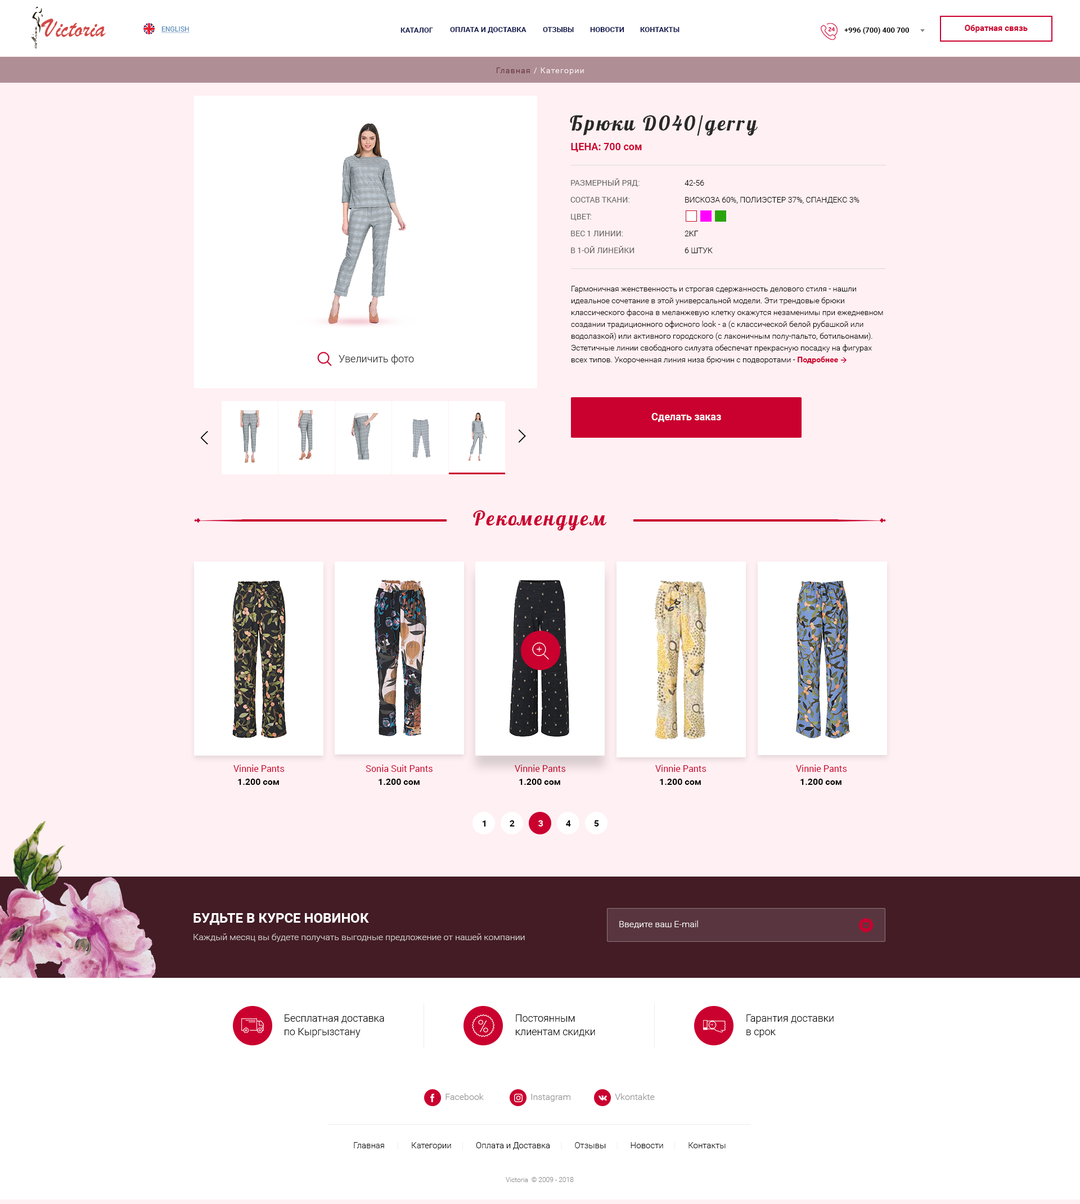
<style>
.page{position:relative;width:1080px;height:1204px;background:#fff0f3}
.page>*{position:absolute;margin:0}
.t1{font:6.8px "Roboto-Regular";color:#5589ba;text-transform:uppercase;text-decoration:underline}
.t2{font:7.3px "Roboto-Bold";color:#12194f;text-transform:uppercase}
.t3{font:7.3px "Roboto-Bold";color:#000000;text-transform:uppercase}
.t4{font:8.4px "Roboto-Bold";color:#ca002f}
.t5{font:20.2px "Pattaya-Regular";letter-spacing:0.1em;color:#292929}
.t6{font:10.1px "Roboto-Bold";color:#ca002f}
.t7{font:7.9px/16.9px "Roboto-Regular";color:#656565;text-transform:uppercase}
.t8{font:7.9px/16.9px "Roboto-Light";color:#000000;text-transform:uppercase}
.t9{font:7.9px/11.8px "Roboto-Light";color:#000000}
.t10{font:7.9px/11.8px "Roboto-Bold";color:#ca002f}
.t11{font:10.1px "Roboto-Light";color:#292929}
.t12{font:10.1px "Roboto-Bold";color:#ffffff}
.t13{font:20.2px "Pattaya-Regular";letter-spacing:0.1em;color:#ca002f}
.t14{font:9px "Roboto-Regular";color:#ca002f}
.t15{font:9px "Roboto-Bold";color:#000000}
.t16{font:9px "Roboto-Bold";color:#000000;text-transform:uppercase}
.t17{font:9px "Roboto-Bold";color:#f7f5fb;text-transform:uppercase}
</style>
<div class="page">
<p class="t1" style="left:161px;top:26px;width:29px;height:7px">English</p>
<p class="t2" style="left:400px;top:28px;width:33px;height:5px">каталог</p>
<p class="t2" style="left:450px;top:27px;width:76px;height:6px">оплата и доставка</p>
<p class="t2" style="left:543px;top:27px;width:31px;height:5px">отзывы</p>
<p class="t2" style="left:590px;top:27px;width:34px;height:5px">новости</p>
<p class="t2" style="left:640px;top:27px;width:40px;height:5px">контакты</p>
<p class="t3" style="left:844px;top:27px;width:65px;height:7px">+996 (700) 400 700</p>
<p class="t4" style="left:965px;top:25px;width:63px;height:8px">Обратная связь</p>
<p class="t5" style="left:570px;top:115px;width:188px;height:21px">Брюки D040/gerry</p>
<p class="t6" style="left:571px;top:143px;width:71px;height:9px">ЦЕНА: 700 сом</p>
<p class="t7" style="left:570px;top:178px;width:70px;height:75px">размерный ряд:<br>состав Ткани:<br>Цвет:<br>вес 1 линии:<br>В 1-ой линейки</p>
<p class="t8" style="left:685px;top:180px;width:175px;height:73px">42-56<br>вискоза 60%, полиэстер 37%, спандекс 3%<br><br>2кг<br>6 штук</p>
<p class="t9" style="left:571px;top:286px;width:312px;height:78px">Гармоничная женственность и строгая сдержанность делового стиля - нашли идеальное сочетание в этой универсальной модели. Эти трендовые брюки классического фасона в меланжевую клетку окажутся незаменимы при ежедневном создании традиционного офисного look - a (с классической белой рубашкой или водолазкой) или активного городского (с лаконичным полу-пальто, ботильонами). Эстетичные линии свободного силуэта обеспечат прекрасную посадку на фигурах всех типов. Укороченная линия низа брючин с подворотами - <span class="t10">Подробнее</span></p>
<p class="t11" style="left:339px;top:354px;width:75px;height:10px">Увеличить фото</p>
<p class="t12" style="left:651px;top:413px;width:70px;height:9px">Сделать заказ</p>
<p class="t13" style="left:473px;top:510px;width:134px;height:20px">Рекомендуем</p>
<p class="t14" style="left:233px;top:764px;width:52px;height:8px">Vinnie Pants</p>
<p class="t14" style="left:366px;top:764px;width:67px;height:8px">Sonia Suit Pants</p>
<p class="t14" style="left:515px;top:764px;width:51px;height:8px">Vinnie Pants</p>
<p class="t14" style="left:655px;top:764px;width:51px;height:8px">Vinnie Pants</p>
<p class="t14" style="left:796px;top:764px;width:51px;height:8px">Vinnie Pants</p>
<p class="t15" style="left:238px;top:778px;width:41px;height:7px">1.200 сом</p>
<p class="t15" style="left:379px;top:778px;width:41px;height:7px">1.200 сом</p>
<p class="t15" style="left:519px;top:778px;width:41px;height:7px">1.200 сом</p>
<p class="t15" style="left:660px;top:778px;width:41px;height:7px">1.200 сом</p>
<p class="t15" style="left:800px;top:778px;width:42px;height:7px">1.200 сом</p>
<p class="t16" style="left:483px;top:820px;width:2px;height:6px">1</p>
<p class="t16" style="left:510px;top:820px;width:5px;height:6px">2</p>
<p class="t17" style="left:538px;top:820px;width:5px;height:6px">3</p>
<p class="t16" style="left:566px;top:820px;width:5px;height:6px">4</p>
<p class="t16" style="left:594px;top:820px;width:5px;height:6px">5</p>
</div>
